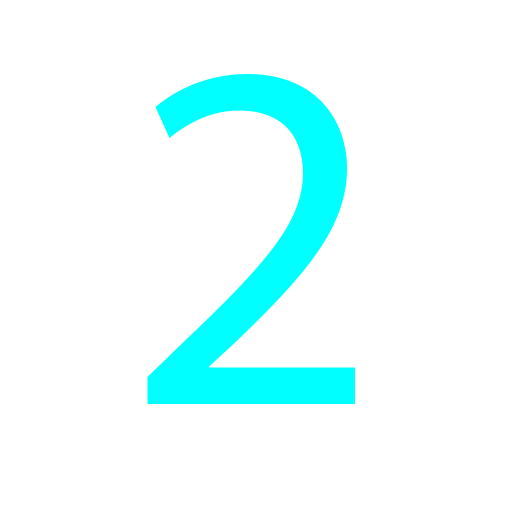
<style>
.page{position:relative;width:512px;height:512px;background:#ffffff}
.page>*{position:absolute;margin:0}
.t1{font:500px "MyriadPro-Regular";color:#00ffff}
</style>
<div class="page">
<p class="t1" style="left:147px;top:74px;width:208px;height:330px">2</p>
</div>
